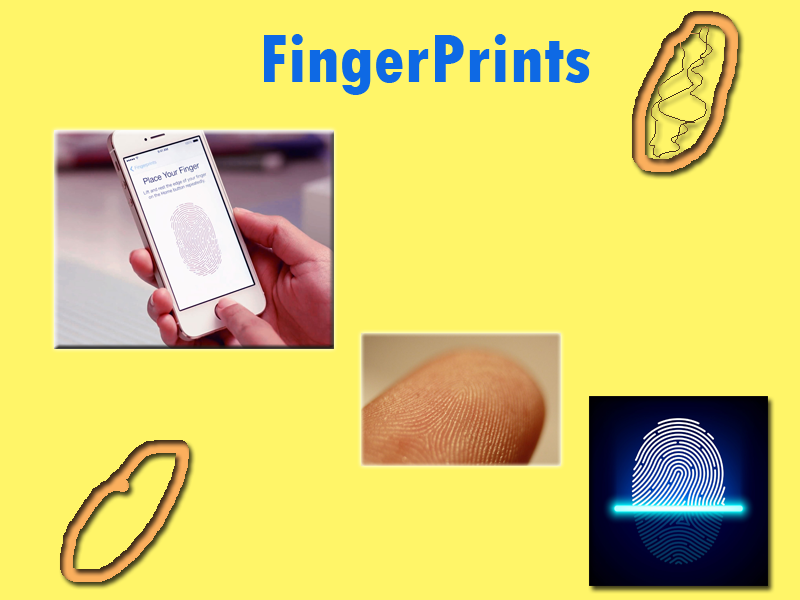
<style>
.page{position:relative;width:800px;height:600px;background:#fff568}
.page>*{position:absolute;margin:0}
.t1{font:72px "TwCenMT-CondensedExtraBold";color:#0e69e4}
</style>
<div class="page">
<p class="t1" style="left:264px;top:34px;width:326px;height:61px">FingerPrints</p>
</div>
